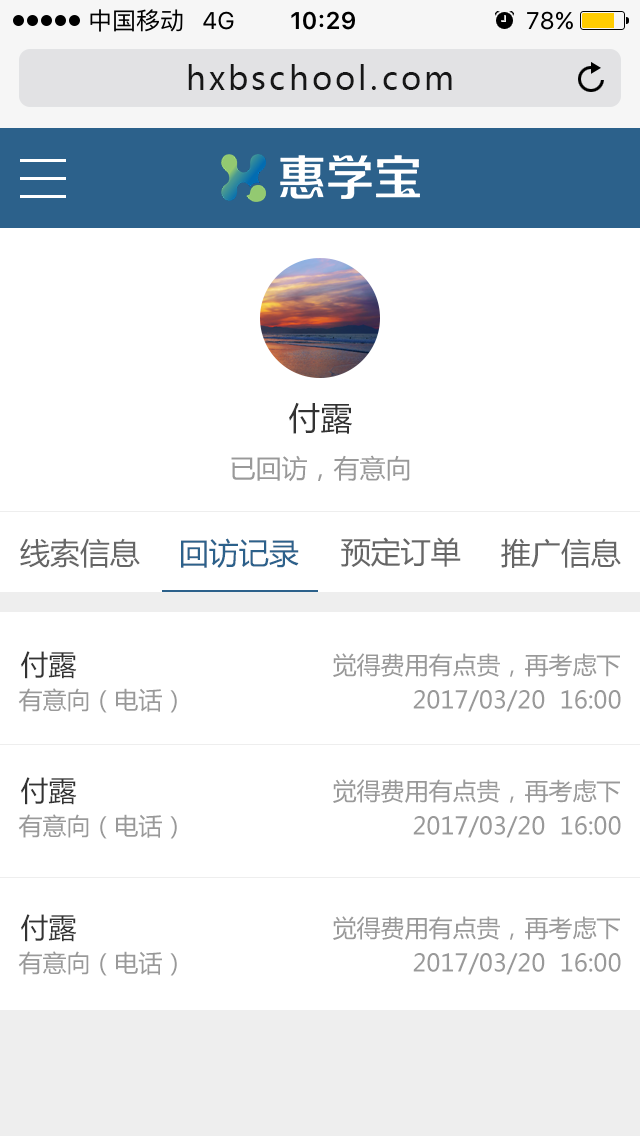
<style>
.page{position:relative;width:640px;height:1136px;background:#ffffff}
.page>*{position:absolute;margin:0}
.t1{font:32px "MicrosoftYaHei";letter-spacing:0.1em;color:#171717}
.t2{font:32px "MicrosoftYaHei";color:#333333}
.t3{font:26px "MicrosoftYaHei";color:#999999}
.t4{font:30px "MicrosoftYaHei";color:#666666}
.t5{font:30px "MicrosoftYaHei";color:#2c618b}
.t6{font:28px "MicrosoftYaHei";color:#333333}
.t7{font:24px "MicrosoftYaHei";color:#999999}
</style>
<div class="page">
<p class="t1" style="left:188px;top:64px;width:264px;height:26px">hxbschool.com</p>
<p class="t2" style="left:289px;top:402px;width:63px;height:32px">付露</p>
<p class="t3" style="left:231px;top:455px;width:179px;height:27px">已回访，有意向</p>
<p class="t4" style="left:20px;top:538px;width:120px;height:30px">线索信息</p>
<p class="t5" style="left:181px;top:538px;width:118px;height:30px">回访记录</p>
<p class="t4" style="left:341px;top:537px;width:120px;height:30px">预定订单</p>
<p class="t4" style="left:501px;top:538px;width:120px;height:30px">推广信息</p>
<p class="t6" style="left:21px;top:651px;width:56px;height:28px">付露</p>
<p class="t7" style="left:333px;top:653px;width:287px;height:24px">觉得费用有点贵，再考虑下</p>
<p class="t7" style="left:18px;top:688px;width:159px;height:25px">有意向（电话）</p>
<p class="t7" style="left:413px;top:690px;width:208px;height:22px">2017/03/20  16:00</p>
<p class="t6" style="left:21px;top:777px;width:56px;height:28px">付露</p>
<p class="t7" style="left:333px;top:779px;width:287px;height:24px">觉得费用有点贵，再考虑下</p>
<p class="t7" style="left:18px;top:814px;width:159px;height:25px">有意向（电话）</p>
<p class="t7" style="left:413px;top:816px;width:208px;height:22px">2017/03/20  16:00</p>
<p class="t6" style="left:21px;top:914px;width:56px;height:28px">付露</p>
<p class="t7" style="left:333px;top:916px;width:287px;height:24px">觉得费用有点贵，再考虑下</p>
<p class="t7" style="left:18px;top:951px;width:159px;height:25px">有意向（电话）</p>
<p class="t7" style="left:413px;top:953px;width:208px;height:22px">2017/03/20  16:00</p>
</div>
